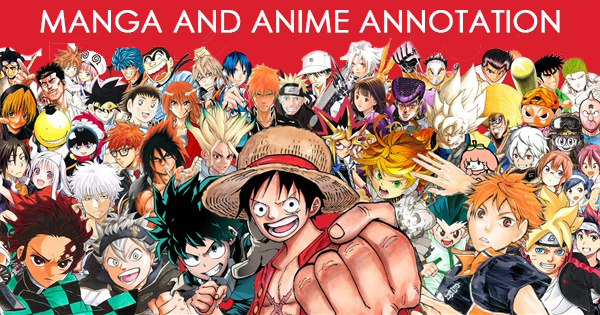
<style>
.page{position:relative;width:600px;height:315px}
.page>*{position:absolute;margin:0}
.t1{font:30px "CenturyGothic";color:#ffffff;font-weight:bold}
</style>
<div class="page">
<p class="t1" style="left:40px;top:10px;width:520px;height:23px">MANGA AND ANIME ANNOTATION</p>
</div>
